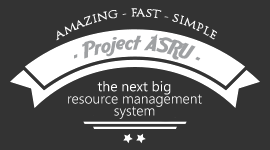
<style>
.page{position:relative;width:270px;height:150px;background:#333333}
.page>*{position:absolute;margin:0}
.t1{font:10.1px/8.7px "TrajanPro-Regular";letter-spacing:-0.02em;color:#fcfcfc;scale:0.86 1}
.t2{font:20.5px "AardvarkCafe";color:#9fa1a3;scale:0.86 1}
.t3{font:14px/12px "SegoeWP-SemiLight";color:#ffffff}
.t4{font:14px/12px "SegoeWP";color:#ffffff}
</style>
<div class="page">
<p class="t1" style="left:56px;top:8px;width:161px;height:33px;text-align:center">AMAZING - FAST - SIMPLE</p>
<p class="t2" style="left:74px;top:34px;width:127px;height:27px;rotate:1deg">- Project ASRU -</p>
<p class="t3" style="left:68px;top:81px;width:134px;height:38px;text-align:center"><span class="t4">the next big<br></span>resource management system</p>
</div>
